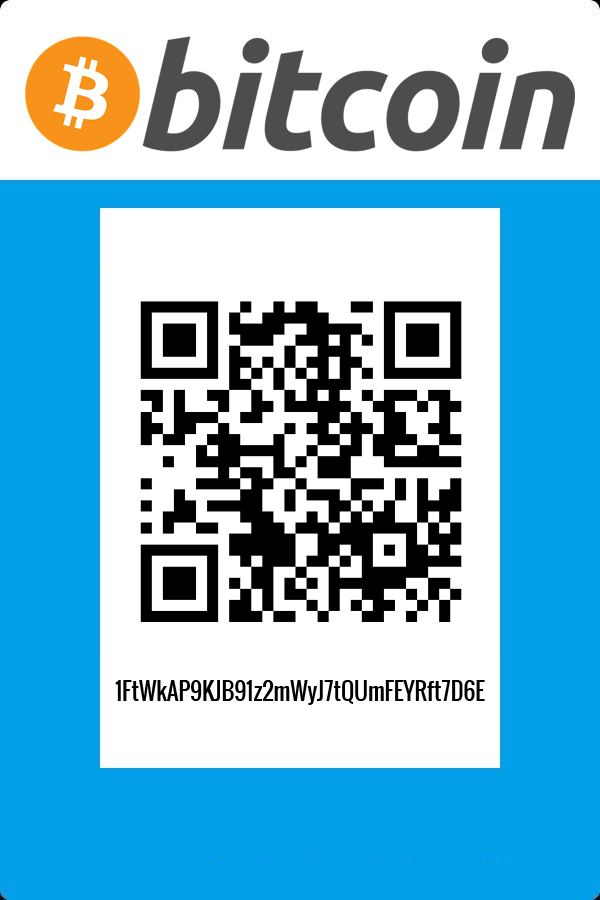
<style>
.page{position:relative;width:600px;height:900px;background:#ffffff}
.page>*{position:absolute;margin:0}
.t1{font:22.7px "Oswald-Regular";color:#000000}
</style>
<div class="page">
<p class="t1" style="left:115px;top:680px;width:370px;height:25px">1FtWkAP9KJB91z2mWyJ7tQUmFEYRft7D6E</p>
</div>
